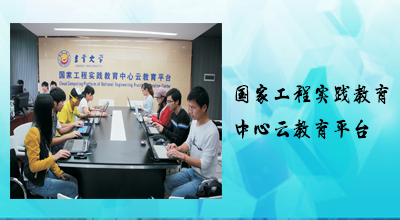
<style>
.page{position:relative;width:400px;height:220px}
.page>*{position:absolute;margin:0}
.t1{font:20px "LiXuKe";color:#000000}
</style>
<div class="page">
<p class="t1" style="left:235px;top:84px;width:154px;height:55px">国家工程实践教育<br>中心云教育平台</p>
</div>
